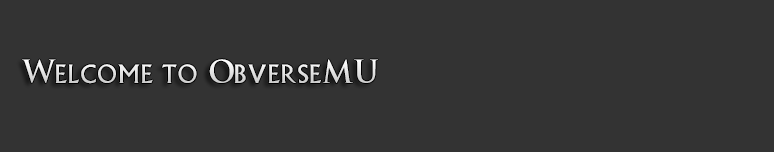
<style>
.page{position:relative;width:774px;height:152px;background:#333333}
.page>*{position:absolute;margin:0}
.t1{font:24px "EPISODE-I";letter-spacing:0.025em;color:#e0e0e0}
</style>
<div class="page">
<p class="t1" style="left:22px;top:59px;width:356px;height:25px">Welcome  to   ObverseMU</p>
</div>
